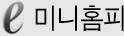
<style>
.page{position:relative;width:124px;height:36px;background:#e6e6e6}
.page>*{position:absolute;margin:0}
.t1{font:28.6px "SandJg";letter-spacing:-0.01em;color:#000000;scale:0.91 1}
</style>
<div class="page">
<p class="t1" style="left:35px;top:5px;width:89px;height:26px">미니홈피</p>
</div>
